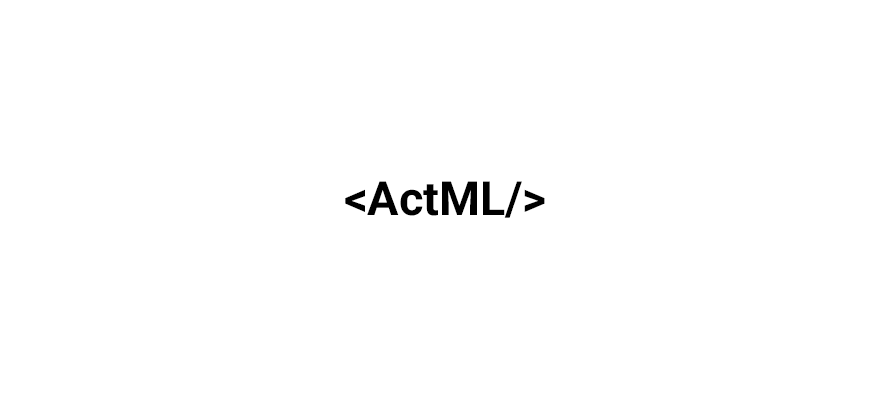
<style>
.page{position:relative;width:890px;height:400px;background:#ffffff}
.page>*{position:absolute;margin:0}
.t1{font:47px "Roboto-Bold";color:#000000}
</style>
<div class="page">
<p class="t1" style="left:345px;top:181px;width:200px;height:37px">&lt;ActML/&gt;</p>
</div>
